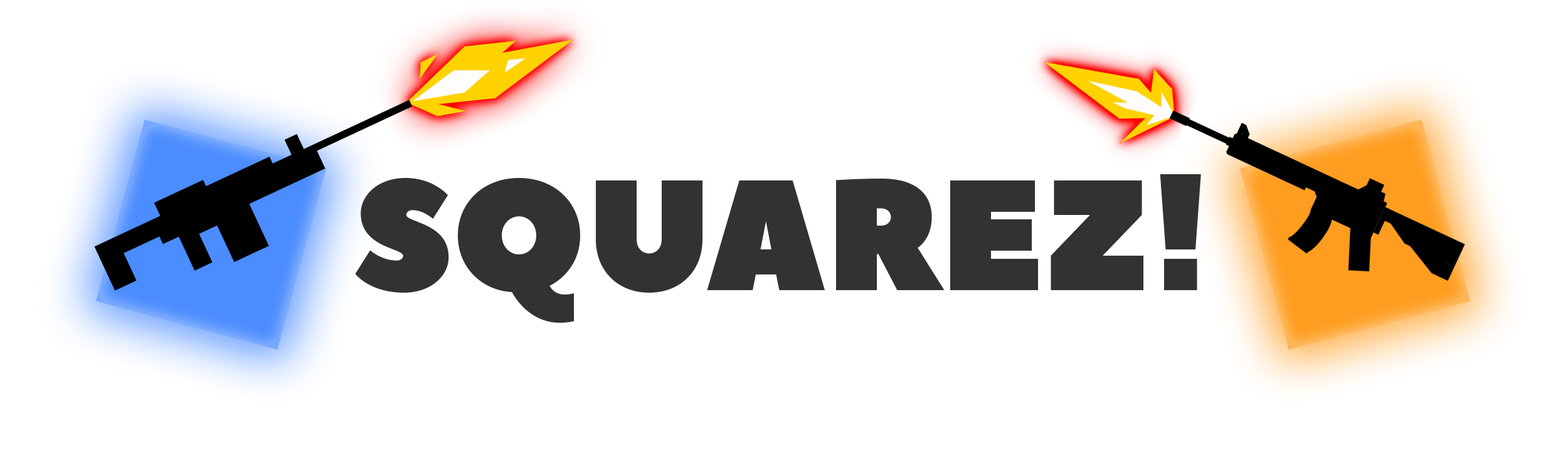
<style>
.page{position:relative;width:1568px;height:470px;background:#ffffff}
.page>*{position:absolute;margin:0}
.t1{font:156.8px "PeaceSans";color:#323232}
</style>
<div class="page">
<p class="t1" style="left:355px;top:174px;width:846px;height:149px">SQUAREZ!</p>
</div>
